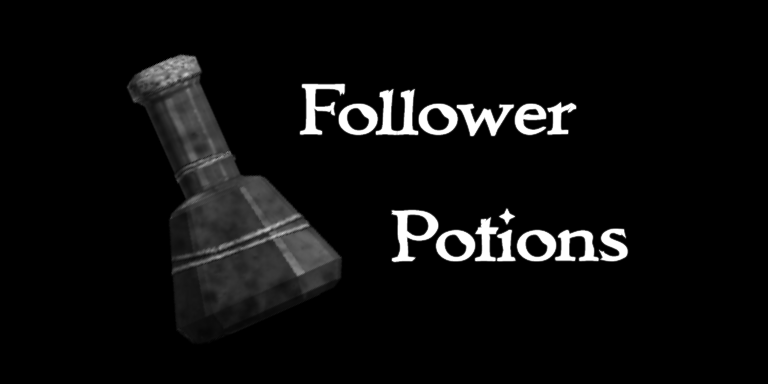
<style>
.page{position:relative;width:768px;height:384px;background:#000000}
.page>*{position:absolute;margin:0}
.t1{font:72px "Immortal";color:#ffffff}
</style>
<div class="page">
<p class="t1" style="left:300px;top:84px;width:276px;height:52px">Follower</p>
<p class="t1" style="left:391px;top:208px;width:237px;height:54px">Potions</p>
</div>
